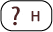
<style>
.page{position:relative;width:53px;height:32px;background:#ffffff}
.page>*{position:absolute;margin:0}
.t1{font:24px "KozGoPr6N-Regular";color:#4f2323;font-weight:bold}
.t2{font:13.1px "KozGoPr6N-Regular";color:#4f2323;font-weight:bold;scale:1.05 1}
</style>
<div class="page">
<p class="t1" style="left:11px;top:6px;width:9px;height:20px">?</p>
<p class="t2" style="left:31px;top:11px;width:9px;height:11px">H</p>
</div>
